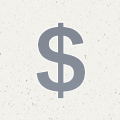
<style>
.page{position:relative;width:120px;height:120px;background:#f2f1ec}
.page>*{position:absolute;margin:0}
.t1{font:80px "HiraginoSansGB-W6";color:#848b97}
</style>
<div class="page">
<p class="t1" style="left:36px;top:22px;width:49px;height:77px">$</p>
</div>
